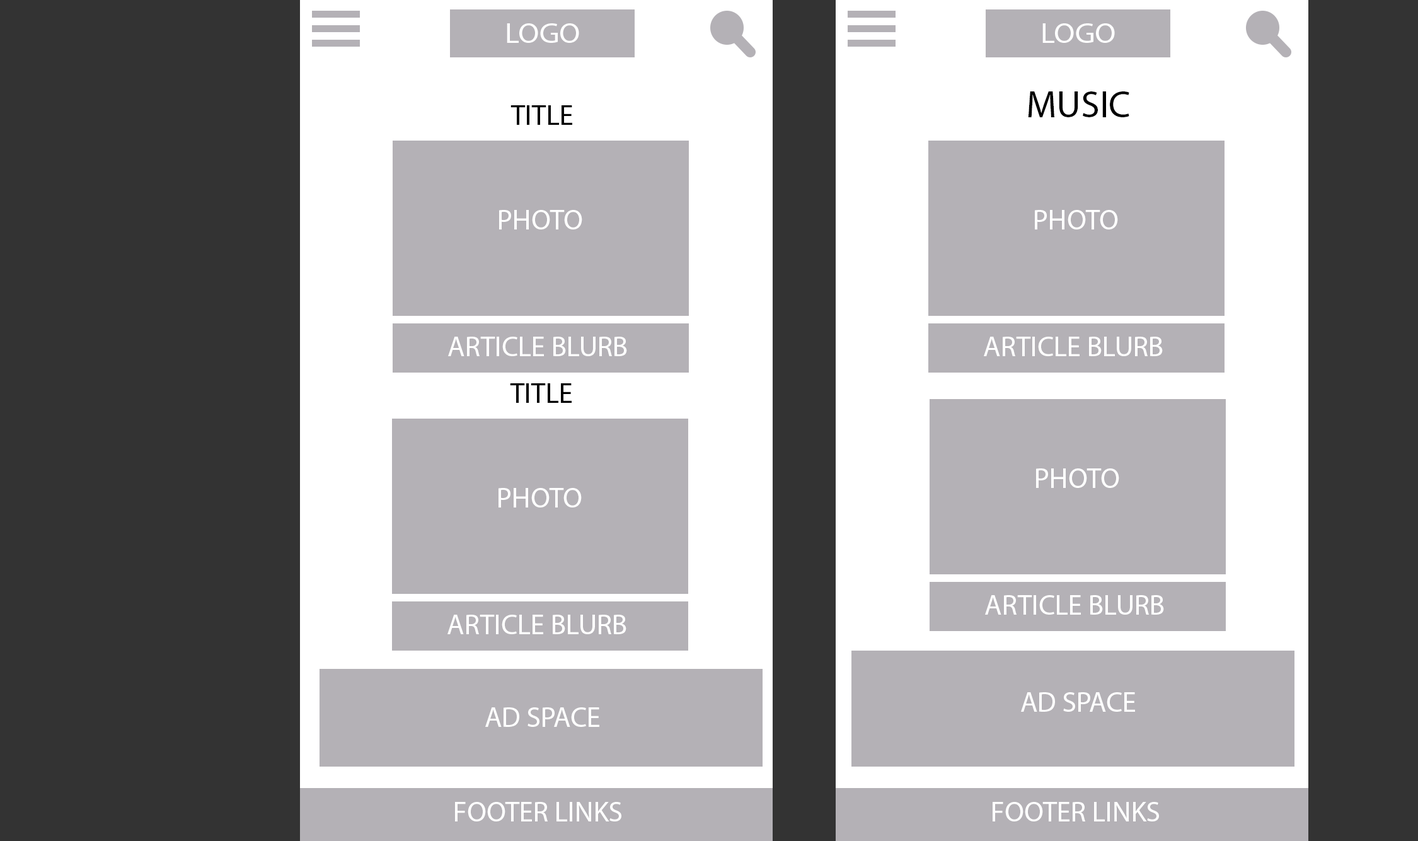
<style>
.page{position:relative;width:1418px;height:841px;background:#333333}
.page>*{position:absolute;margin:0}
.t1{font:28.4px "MyriadPro-Regular";color:#ffffff;scale:1.08 1}
.t2{font:37.8px "MyriadPro-Regular";color:#000000}
.t3{font:28.4px "MyriadPro-Regular";color:#000000}
.t4{font:28.4px "MyriadPro-Regular";color:#ffffff}
</style>
<div class="page">
<p class="t1" style="left:507px;top:23px;width:72px;height:20px">LOGO</p>
<p class="t1" style="left:1043px;top:23px;width:72px;height:20px">LOGO</p>
<p class="t2" style="left:1028px;top:91px;width:101px;height:26px">MUSIC</p>
<p class="t3" style="left:511px;top:105px;width:61px;height:20px">TITLE</p>
<p class="t4" style="left:499px;top:210px;width:83px;height:19px">PHOTO</p>
<p class="t4" style="left:1035px;top:210px;width:83px;height:19px">PHOTO</p>
<p class="t4" style="left:448px;top:337px;width:179px;height:19px">ARTICLE BLURB</p>
<p class="t4" style="left:984px;top:337px;width:179px;height:19px">ARTICLE BLURB</p>
<p class="t3" style="left:510px;top:383px;width:62px;height:20px">TITLE</p>
<p class="t4" style="left:1036px;top:468px;width:83px;height:20px">PHOTO</p>
<p class="t4" style="left:499px;top:488px;width:83px;height:19px">PHOTO</p>
<p class="t4" style="left:985px;top:595px;width:179px;height:20px">ARTICLE BLURB</p>
<p class="t4" style="left:448px;top:615px;width:179px;height:19px">ARTICLE BLURB</p>
<p class="t4" style="left:1021px;top:692px;width:114px;height:20px">AD SPACE</p>
<p class="t4" style="left:485px;top:707px;width:114px;height:20px">AD SPACE</p>
<p class="t4" style="left:455px;top:802px;width:166px;height:19px">FOOTER LINKS</p>
<p class="t4" style="left:993px;top:802px;width:166px;height:19px">FOOTER LINKS</p>
</div>
